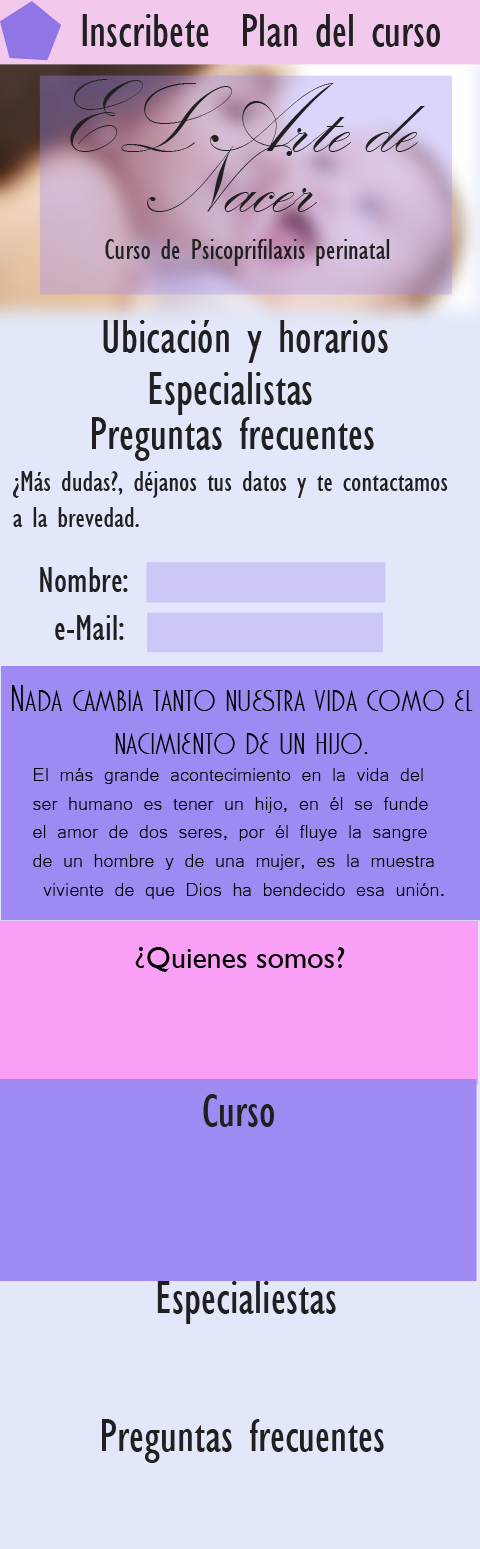
<style>
.page{position:relative;width:480px;height:1549px;background:#e2e8f9}
.page>*{position:absolute;margin:0}
.t1{font:48px "GillSansMT-Condensed";color:#202020}
.t2{font:100px/60px "KunstlerScript";color:#202020}
.t3{font:30px "GillSansMT-Condensed";color:#202020}
.t4{font:38px "GillSansMT-Condensed";color:#202020}
.t5{font:36px "MarquisetteBTNLight";color:#000000}
.t6{font:24px "Microsoft-Yi-Baiti";color:#000000}
.t7{font:30px "GillSansMT";color:#000000}
.t8{font:30px "MaiandraGD-Regular";color:#000000}
</style>
<div class="page">
<p class="t1" style="left:82px;top:14px;width:127px;height:33px">Inscribete</p>
<p class="t1" style="left:243px;top:14px;width:197px;height:33px">Plan del curso</p>
<p class="t2" style="left:70px;top:79px;width:355px;height:133px;text-align:center">EL Arte de<br>Nacer</p>
<p class="t3" style="left:105px;top:239px;width:285px;height:27px">Curso de Psicoprifilaxis perinatal</p>
<p class="t1" style="left:103px;top:320px;width:285px;height:43px">Ubicación y horarios</p>
<p class="t1" style="left:149px;top:372px;width:163px;height:43px">Especialistas</p>
<p class="t1" style="left:92px;top:417px;width:282px;height:44px">Preguntas frecuentes</p>
<p class="t3" style="left:13px;top:471px;width:435px;height:56px">¿Más dudas?, déjanos tus datos y te contactamos<br>a la brevedad.</p>
<p class="t4" style="left:40px;top:567px;width:88px;height:25px">Nombre:</p>
<p class="t4" style="left:55px;top:615px;width:69px;height:25px">e-Mail:</p>
<p class="t5" style="left:12px;top:685px;width:461px;height:69px;text-align:center">Nada cambia tanto nuestra vida como el<br>nacimiento de un hijo.</p>
<p class="t6" style="left:33px;top:768px;width:411px;height:131px">El más grande acontecimiento en la vida del <br>ser humano es tener un hijo, en él se funde <br>el amor de dos seres, por él fluye la sangre <br>de un hombre y de una mujer, es la muestra<br> viviente de que Dios ha bendecido esa unión.</p>
<p class="t7" style="left:135px;top:947px;width:210px;height:25px"><span class="t8">¿</span>Quienes somos?</p>
<p class="t1" style="left:203px;top:1094px;width:71px;height:33px">Curso</p>
<p class="t1" style="left:157px;top:1281px;width:179px;height:43px">Especialiestas</p>
<p class="t1" style="left:102px;top:1419px;width:282px;height:44px">Preguntas frecuentes</p>
</div>
